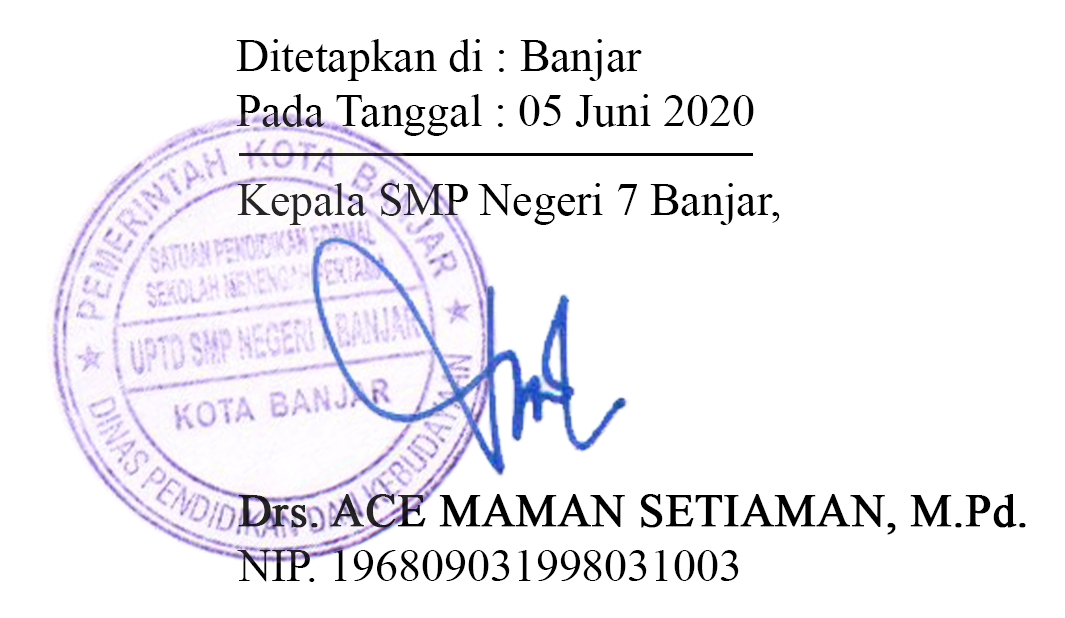
<style>
.page{position:relative;width:1065px;height:618px;background:#ffffff}
.page>*{position:absolute;margin:0}
.t1{font:45.8px "TimesNewRomanPSMT";color:#000000}
.t2{font:45.8px "TimesNewRomanPSMT"}
.t3{font:45.8px "TimesNewRomanPSMT";color:#000000;font-weight:bold}
</style>
<div class="page">
<p class="t1" style="left:236px;top:39px;width:518px;height:97px">Ditetapkan di : Banjar<br>Pada Tanggal : 05 Juni 2020</p>
<p class="t2" style="left:237px;top:183px;width:543px;height:42px">Kepala SMP Negeri 7 Banjar,</p>
<p class="t3" style="left:238px;top:494px;width:788px;height:41px">Drs. ACE MAMAN SETIAMAN, M.Pd.</p>
<p class="t1" style="left:237px;top:550px;width:502px;height:32px">NIP. 196809031998031003</p>
</div>
